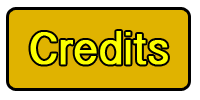
<style>
.page{position:relative;width:200px;height:100px;background:#e0b300}
.page>*{position:absolute;margin:0}
.t1{font:48px "InaiMathi";color:#fcff00;font-weight:bold}
</style>
<div class="page">
<p class="t1" style="left:30px;top:31px;width:138px;height:34px">Credits</p>
</div>
